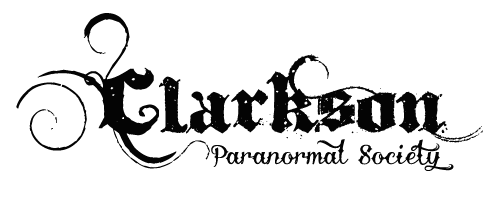
<style>
.page{position:relative;width:494px;height:200px;background:#ffffff}
.page>*{position:absolute;margin:0}
.t1{font:125px "Ithornt";color:#040404}
.t2{font:200px "Ithornt";color:#040404}
.t3{font:24px "DelinquenteDemo";color:#040404}
</style>
<div class="page">
<p class="t1" style="left:16px;top:13px;width:467px;height:156px"><span class="t2">C</span>larkson</p>
<p class="t3" style="left:211px;top:139px;width:243px;height:32px">Paranormal Society</p>
</div>
